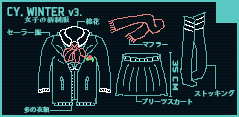
<style>
.page{position:relative;width:239px;height:117px;background:#050f1c}
.page>*{position:absolute;margin:0}
.t1{font:14.1px "Bombardier";color:#6cd1cb}
.t2{font:14.1px "AdobeHeitiStd-Regular";color:#6cd1cb}
.t3{font:12px "Bombardier";color:#6cd1cb}
.t4{font:6.7px "FZFENGRSTS-EB--GB1-0";color:#6cd1cb;scale:1.13 1}
.t5{font:7px "AdobeHeitiStd-Regular";color:#6cd1cb}
.t6{font:6.5px "AdobeHeitiStd-Regular";color:#6cd1cb}
.t7{font:8.3px "Bombardier";color:#6cd1cb;scale:1.65 1}
.t8{font:6.7px "AdobeHeitiStd-Regular";color:#6cd1cb}
</style>
<div class="page">
<p class="t1" style="left:7px;top:7px;width:75px;height:10px">CY<span class="t2">. </span>WINTER <span class="t3">v3.</span></p>
<p class="t4" style="left:24px;top:16px;width:46px;height:8px">女子の新制服</p>
<p class="t5" style="left:7px;top:29px;width:35px;height:7px">セーラー服</p>
<p class="t5" style="left:85px;top:18px;width:15px;height:7px">棉花</p>
<p class="t6" style="left:142px;top:42px;width:26px;height:6px">マフラー</p>
<p class="t7" style="left:172px;top:60px;width:7px;height:31px;rotate:90deg">35 CM</p>
<p class="t8" style="left:194px;top:89px;width:41px;height:8px">ストッキング</p>
<p class="t6" style="left:142px;top:98px;width:51px;height:7px">プリーツスカート</p>
<p class="t6" style="left:24px;top:106px;width:26px;height:7px">多の衣類</p>
</div>
